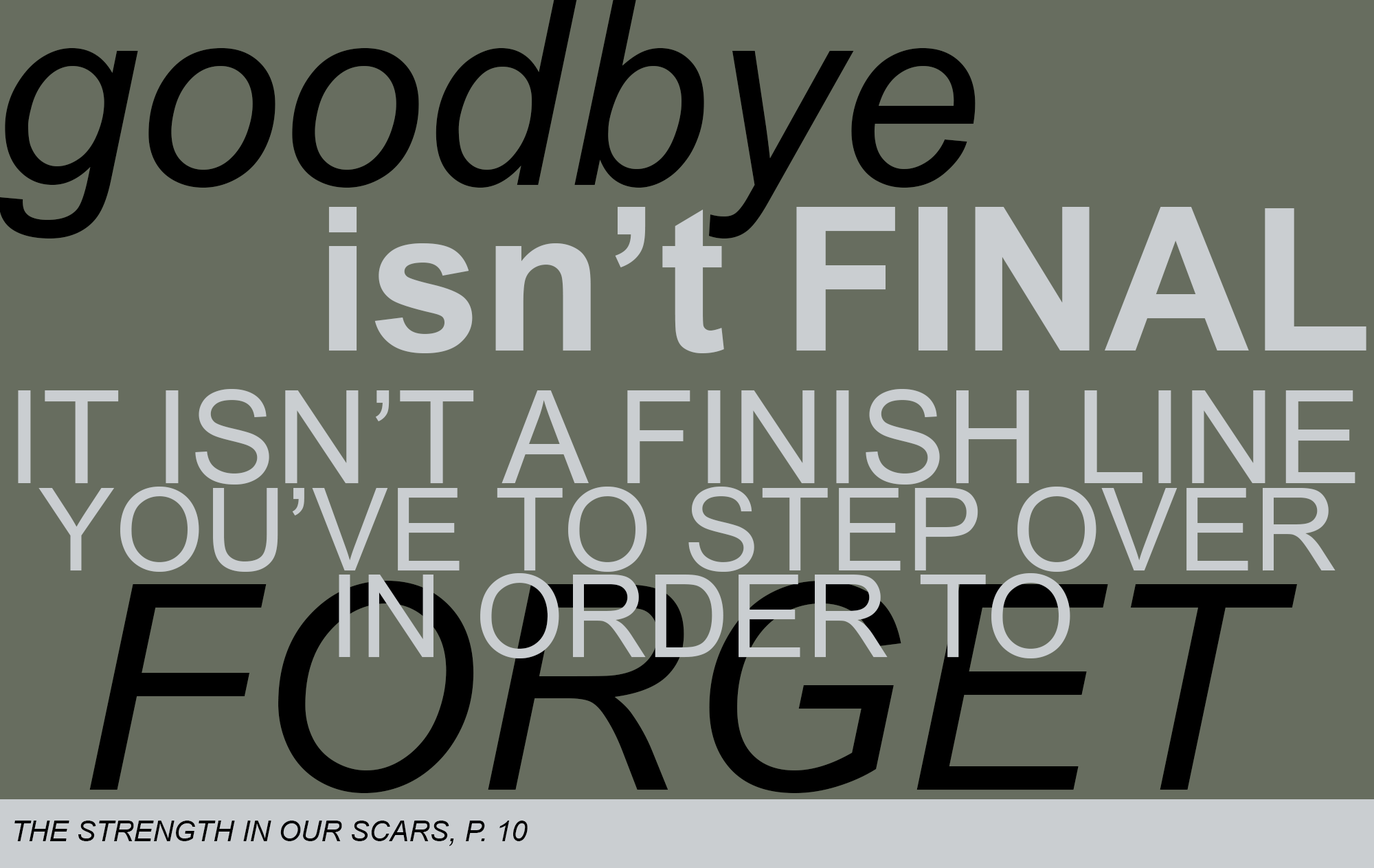
<style>
.page{position:relative;width:1374px;height:868px;background:#676d5f}
.page>*{position:absolute;margin:0}
.t1{font:257.7px "Arial-ItalicMT";color:#000000}
.t2{font:200.4px "Arial-BoldMT";color:#caced1}
.t3{font:128.8px "ArialMT";color:#caced1}
.t4{font:114.5px "ArialMT";color:#caced1}
.t5{font:286.3px "Arial-ItalicMT";color:#000000}
.t6{font:114.4px "ArialMT";color:#caced1}
.t7{font:28.6px "Arial-ItalicMT";color:#000000}
</style>
<div class="page">
<p class="t1" style="left:0px;top:0px;width:976px;height:238px">goodbye</p>
<p class="t2" style="left:328px;top:207px;width:1039px;height:146px">isn’t FINAL</p>
<p class="t3" style="left:18px;top:389px;width:1338px;height:95px">IT ISN’T A FINISH LINE</p>
<p class="t4" style="left:38px;top:486px;width:1298px;height:86px">YOU’VE TO STEP OVER</p>
<p class="t5" style="left:89px;top:581px;width:1208px;height:212px">FORGET</p>
<p class="t6" style="left:339px;top:573px;width:731px;height:85px">IN ORDER TO</p>
<p class="t7" style="left:14px;top:820px;width:514px;height:26px">THE STRENGTH IN OUR SCARS, P. 10</p>
</div>
